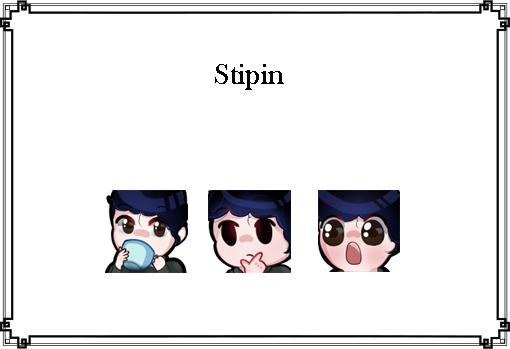
<style>
.page{position:relative;width:510px;height:349px;background:#ffffff}
.page>*{position:absolute;margin:0}
.t1{font:30px "BaskOldFace";color:#000000}
</style>
<div class="page">
<p class="t1" style="left:215px;top:64px;width:69px;height:26px">Stipin</p>
</div>
